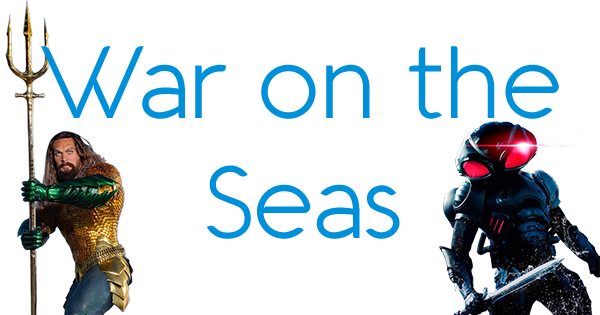
<style>
.page{position:relative;width:600px;height:315px;background:#ffffff}
.page>*{position:absolute;margin:0}
.t1{font:100px "Aquawax-Light";color:#0090da}
</style>
<div class="page">
<p class="t1" style="left:41px;top:46px;width:518px;height:193px;text-align:center">War on the<br>Seas</p>
</div>
